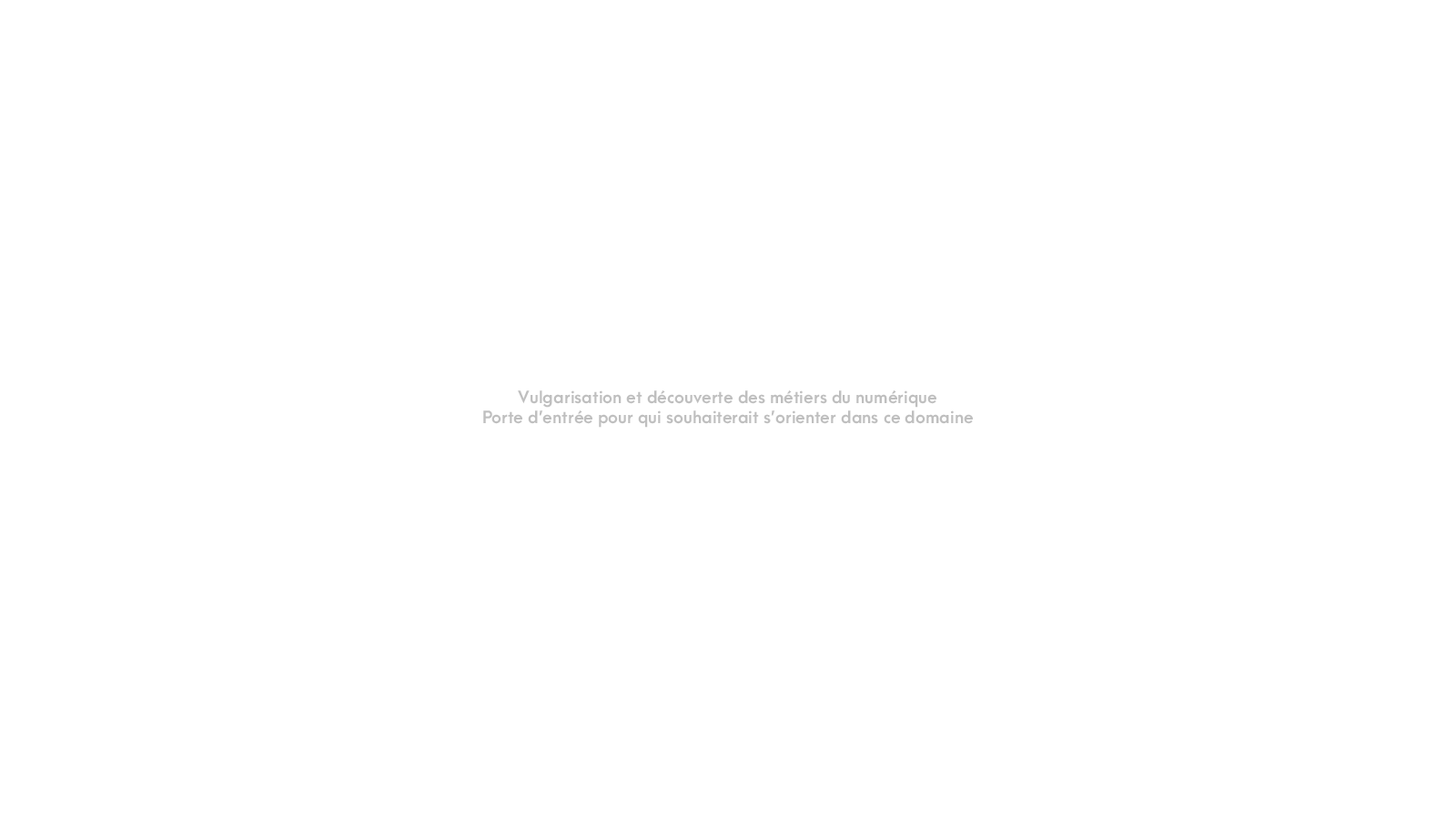
<style>
.page{position:relative;width:1456px;height:819px;background:#ffffff}
.page>*{position:absolute;margin:0}
.t1{font:16.4px/20px "ArcaMajora3-Bold";color:#bfbfbf}
.t2{font:72.8px/32.8px "ArcaMajora3-Heavy";color:#000000}
.t3{font:16.4px/32.8px "ArcaMajora3-Bold";color:#bfbfbf}
</style>
<div class="page">
<p class="t1" style="left:483px;top:390px;width:490px;height:38px;text-align:center"><span class="t2"><br></span><span class="t3">Vulgarisation et découverte des métiers du numérique<br></span>Porte d’entrée pour qui souhaiterait s’orienter dans ce domaine</p>
</div>
